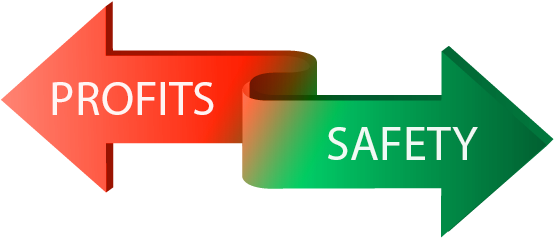
<style>
.page{position:relative;width:554px;height:238px;background:#ffffff}
.page>*{position:absolute;margin:0}
.t1{font:48px "MyriadPro-Regular";color:#ffffff}
</style>
<div class="page">
<p class="t1" style="left:52px;top:82px;width:162px;height:33px">PROFITS</p>
<p class="t1" style="left:328px;top:127px;width:150px;height:33px">SAFETY</p>
</div>
